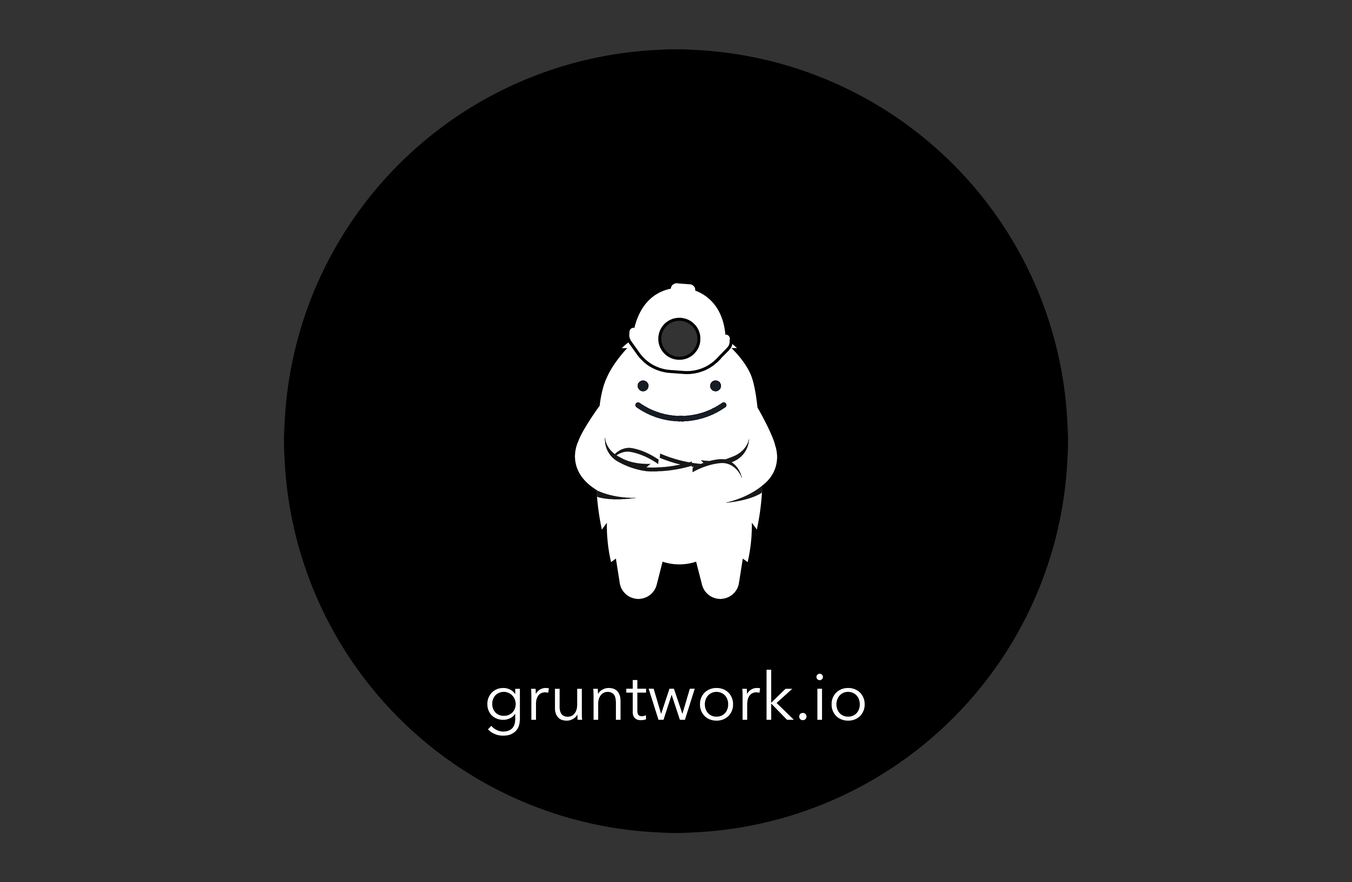
<style>
.page{position:relative;width:1352px;height:882px;background:#333333}
.page>*{position:absolute;margin:0}
.t1{font:66.1px "AvenirNext-Regular";color:#ffffff}
</style>
<div class="page">
<p class="t1" style="left:487px;top:670px;width:377px;height:66px">gruntwork.io</p>
</div>
